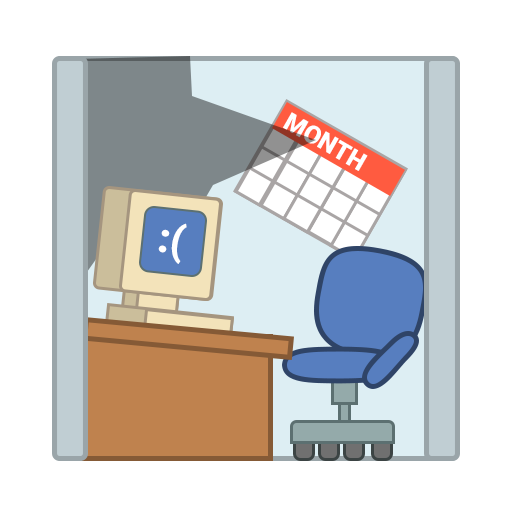
<style>
.page{position:relative;width:512px;height:512px;background:#ffffff}
.page>*{position:absolute;margin:0}
.t1{font:25px "Roboto-Black";color:#ffffff}
.t2{font:40.9px "Roboto-Black";color:#ffffff}
</style>
<div class="page">
<p class="t1" style="left:283px;top:112px;width:85px;height:59px;rotate:30deg">MONTH</p>
<p class="t2" style="left:158px;top:223px;width:29px;height:41px;rotate:10deg">:(</p>
</div>
